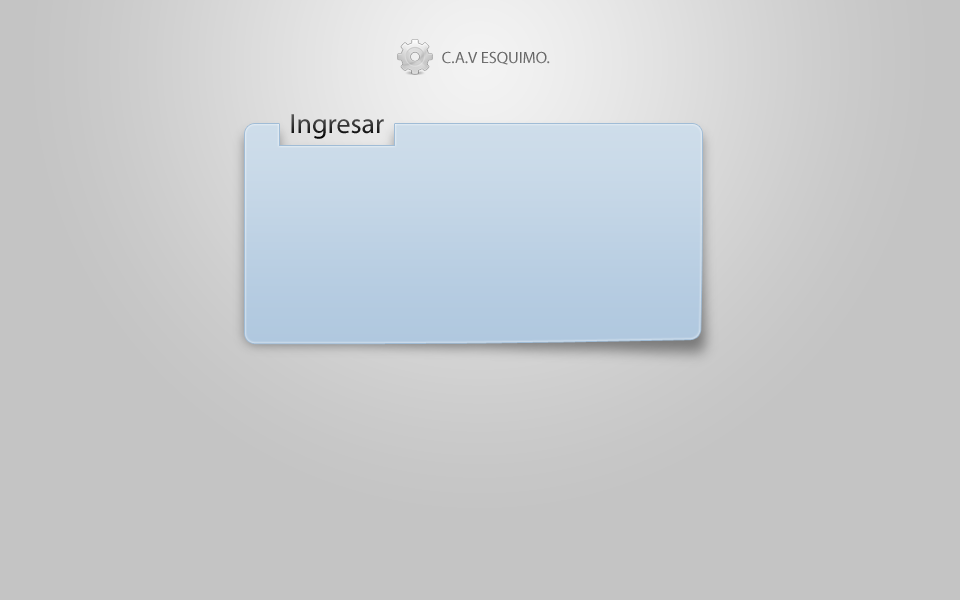
<style>
.page{position:relative;width:960px;height:600px;background:#c4c4c4}
.page>*{position:absolute;margin:0}
.t1{font:16.4px "MyriadPro-Regular";color:#696969;text-transform:uppercase}
.t2{font:28px "MyriadPro-Regular"}
</style>
<div class="page">
<p class="t1" style="left:442px;top:51px;width:108px;height:14px">C.A.V Esquimo.</p>
<p class="t2" style="left:291px;top:114px;width:93px;height:25px">Ingresar</p>
</div>
